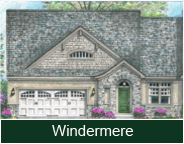
<style>
.page{position:relative;width:184px;height:144px}
.page>*{position:absolute;margin:0}
.t1{font:15px "ArialMT";color:#fffdfd}
</style>
<div class="page">
<p class="t1" style="left:52px;top:125px;width:81px;height:11px">Windermere</p>
</div>
